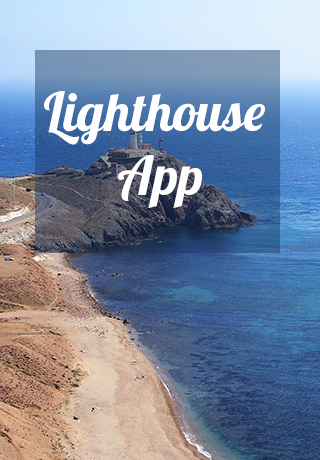
<style>
.page{position:relative;width:320px;height:460px}
.page>*{position:absolute;margin:0}
.t1{font:53.5px "Lobster1.4";color:#fefefe}
</style>
<div class="page">
<p class="t1" style="left:44px;top:91px;width:221px;height:117px;text-align:center">Lighthouse<br> App</p>
</div>
